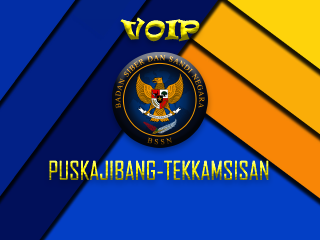
<style>
.page{position:relative;width:320px;height:240px}
.page>*{position:absolute;margin:0}
.t1{font:25px "Ravie";color:#fff001}
.t2{font:25px "AgencyFB-Reg";color:#fff001}
</style>
<div class="page">
<p class="t1" style="left:120px;top:17px;width:80px;height:25px">VOIP</p>
<p class="t2" style="left:49px;top:160px;width:220px;height:20px">PUSKAJIBANG-TEKKAMSISAN</p>
</div>
